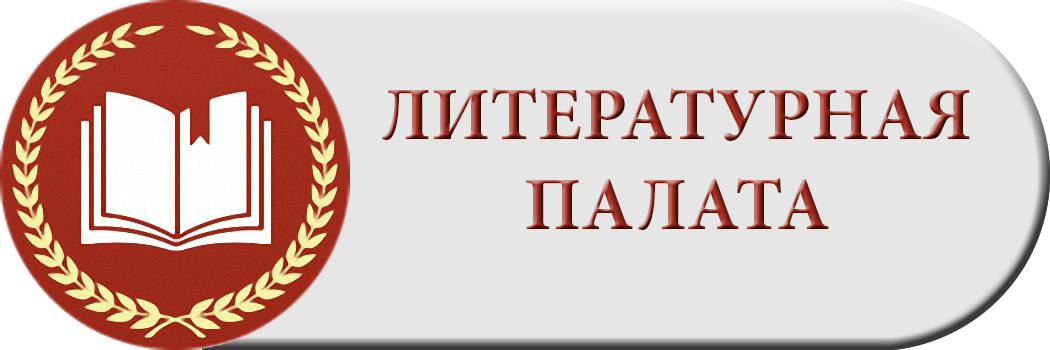
<style>
.page{position:relative;width:1050px;height:350px;background:#e6e6e6}
.page>*{position:absolute;margin:0}
.t1{font:75px "MinionPro-Bold";text-transform:uppercase}
</style>
<div class="page">
<p class="t1" style="left:382px;top:88px;width:588px;height:142px;text-align:center">Литературная палата</p>
</div>
